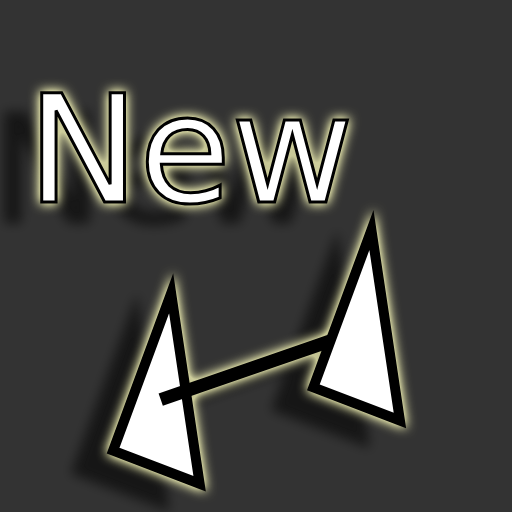
<style>
.page{position:relative;width:512px;height:512px;background:#333333}
.page>*{position:absolute;margin:0}
.t1{font:150px "DejaVuSans"}
</style>
<div class="page">
<p class="t1" style="left:38px;top:89px;width:313px;height:119px">New</p>
</div>
